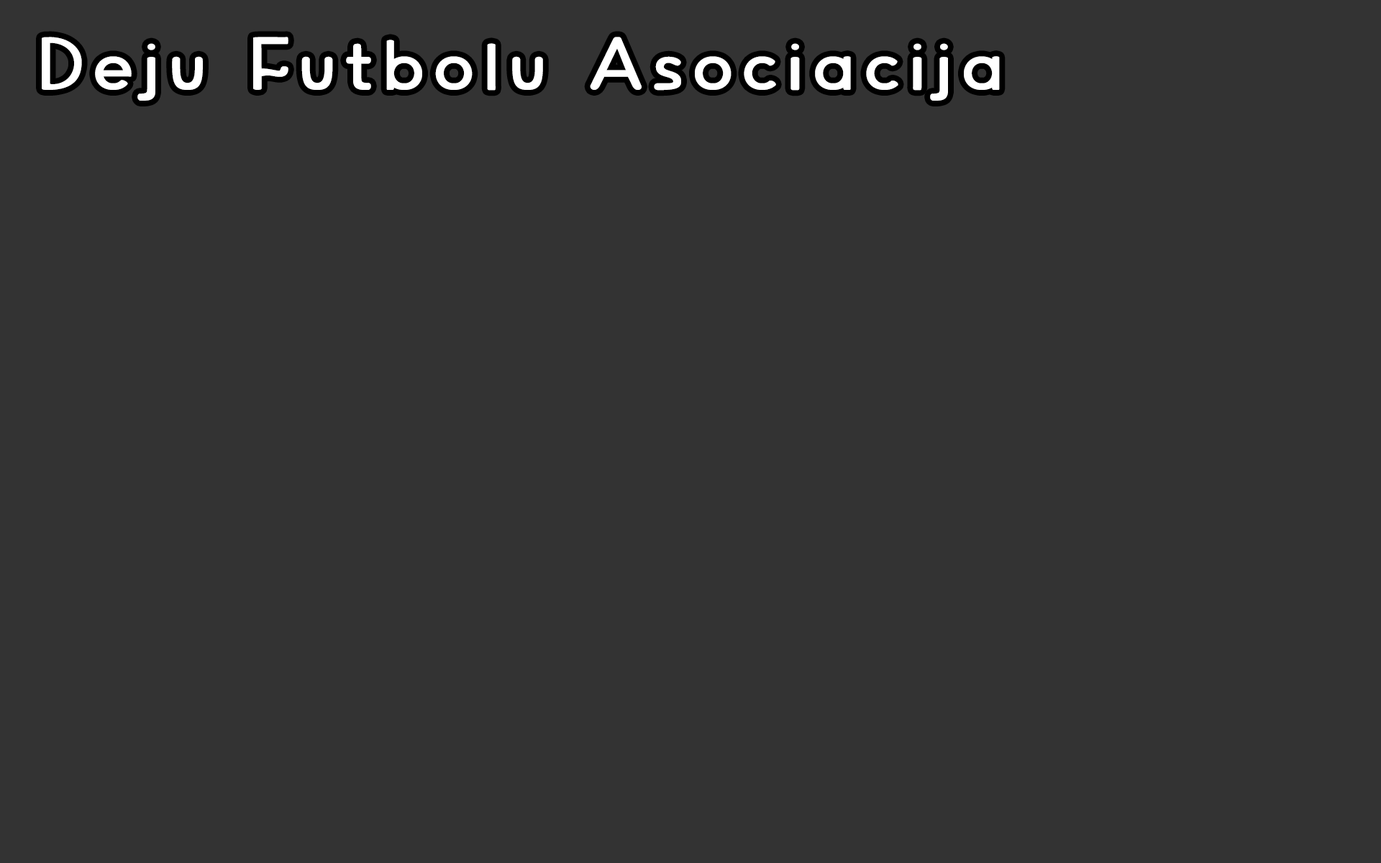
<style>
.page{position:relative;width:1381px;height:863px;background:#333333}
.page>*{position:absolute;margin:0}
.t1{font:66.1px "NeuerWeltschmerzDEMO";letter-spacing:0.14em;color:#ffffff;scale:1.16 1}
</style>
<div class="page">
<p class="t1" style="left:42px;top:37px;width:958px;height:64px">Deju Futbolu Asociacija</p>
</div>
